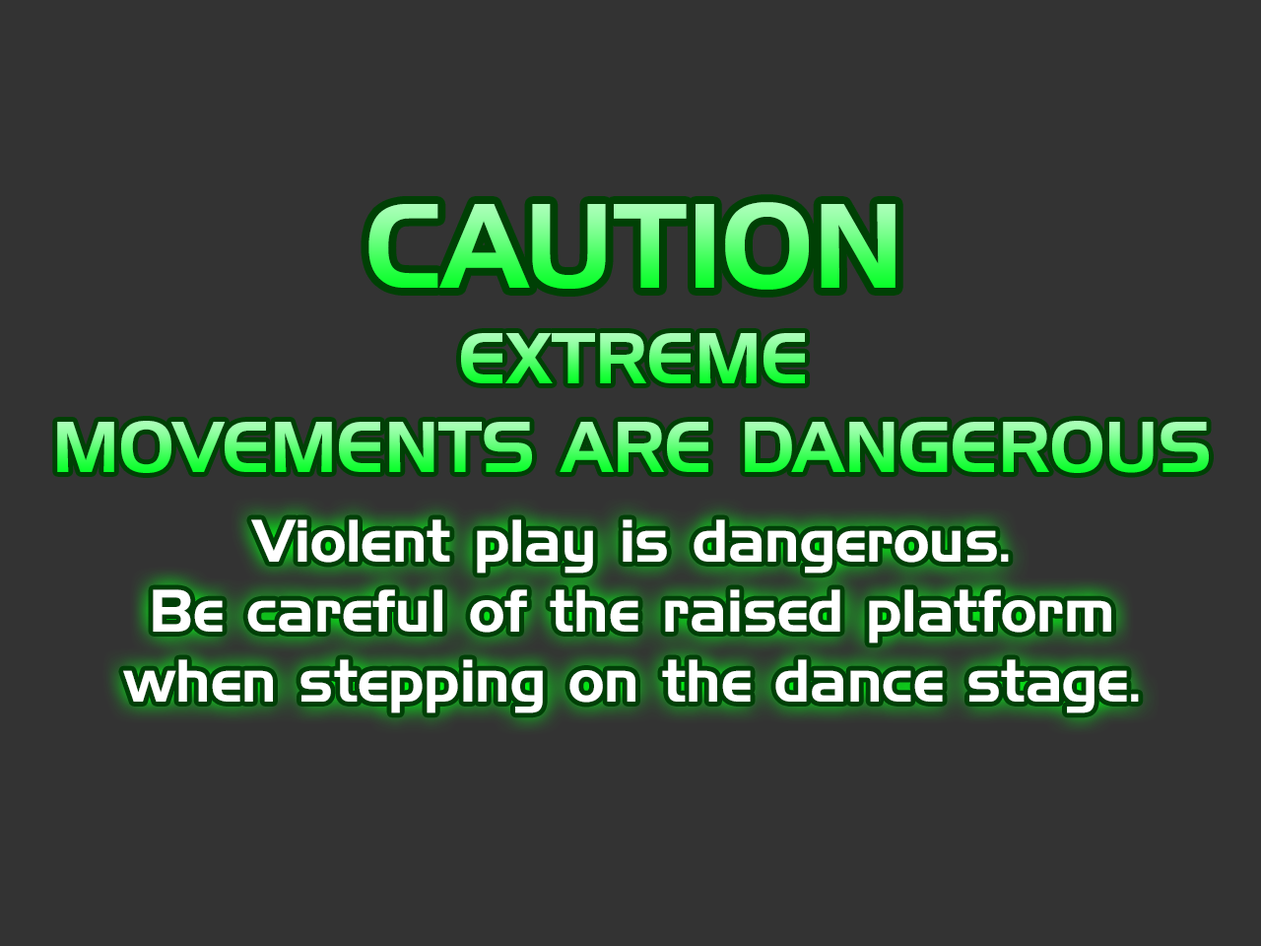
<style>
.page{position:relative;width:1261px;height:946px;background:#333333}
.page>*{position:absolute;margin:0}
.t1{font:116.8px "HandelGothicBT-Regular"}
.t2{font:70.1px "HandelGothicBT-Regular"}
.t3{font:58.4px "HandelGothicBT-Regular";color:#ffffff}
</style>
<div class="page">
<p class="t1" style="left:368px;top:202px;width:527px;height:88px">CAUTION</p>
<p class="t2" style="left:461px;top:333px;width:344px;height:50px">EXTREME</p>
<p class="t2" style="left:57px;top:421px;width:1152px;height:52px">MOVEMENTS ARE DANGEROUS</p>
<p class="t3" style="left:123px;top:519px;width:1016px;height:194px;text-align:center">Violent play is dangerous.<br>Be careful of the raised platform<br>when stepping on the dance stage.</p>
</div>
